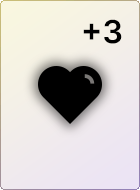
<style>
.page{position:relative;width:140px;height:190px}
.page>*{position:absolute;margin:0}
.t1{font:32px "Inter-SemiBold";color:#000000}
</style>
<div class="page">
<p class="t1" style="left:83px;top:19px;width:39px;height:25px">+3</p>
</div>
